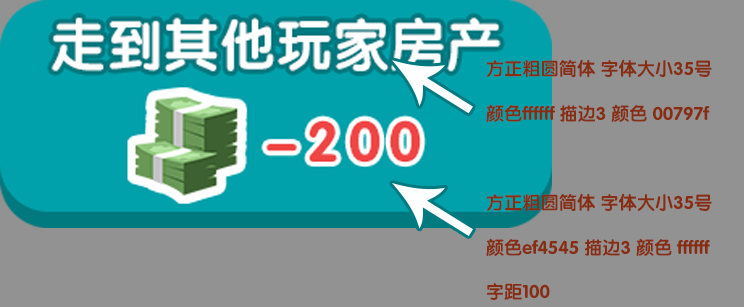
<style>
.page{position:relative;width:744px;height:307px;background:#929292}
.page>*{position:absolute;margin:0}
.t1{font:18.2px/44.3px "FZY4JW--GB1-0";color:#882d11}
</style>
<div class="page">
<p class="t1" style="left:486px;top:59px;width:226px;height:63px">方正粗圆简体 字体大小35号<br>颜色ffffff 描边3 颜色 00797f</p>
<p class="t1" style="left:486px;top:193px;width:226px;height:107px">方正粗圆简体 字体大小35号<br>颜色ef4545 描边3 颜色 ffffff<br>字距100</p>
</div>
